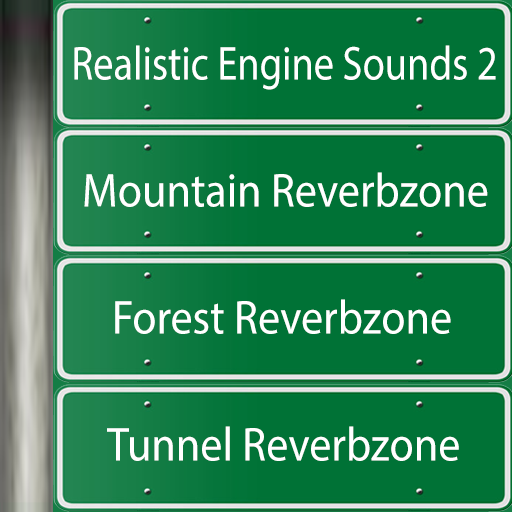
<style>
.page{position:relative;width:512px;height:512px;background:#007236}
.page>*{position:absolute;margin:0}
.t1{font:48px "MyriadPro-Regular";color:#ffffff;scale:0.84 1}
.t2{font:48px "MyriadPro-Regular";color:#ffffff;scale:0.92 1}
</style>
<div class="page">
<p class="t1" style="left:74px;top:45px;width:422px;height:45px">Realistic Engine Sounds 2</p>
<p class="t2" style="left:84px;top:172px;width:404px;height:35px">Mountain Reverbzone</p>
<p class="t2" style="left:115px;top:299px;width:336px;height:35px">Forest Reverbzone</p>
<p class="t2" style="left:107px;top:426px;width:352px;height:35px">Tunnel Reverbzone</p>
</div>
